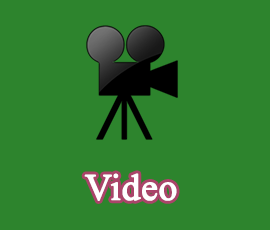
<style>
.page{position:relative;width:270px;height:230px;background:#2d842d}
.page>*{position:absolute;margin:0}
.t1{font:37px "TimesNewRomanPSMT";color:#ffffff;font-weight:bold}
</style>
<div class="page">
<p class="t1" style="left:84px;top:173px;width:93px;height:28px">Video</p>
</div>
